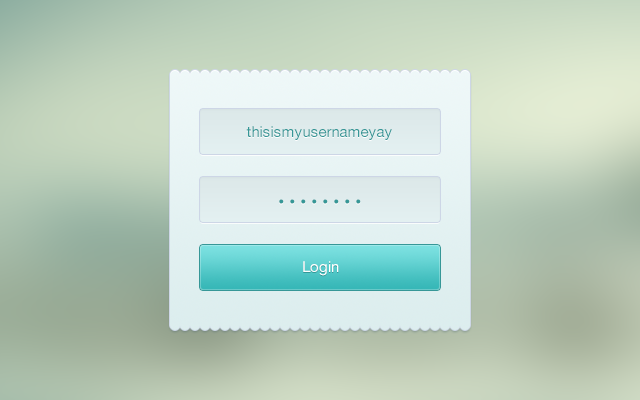
<style>
.page{position:relative;width:640px;height:400px}
.page>*{position:absolute;margin:0}
.t1{font:15px/71px "HelveticaNeue";color:#369797}
.t2{font:18px/71px "Helvetica-Bold";color:#369797}
.t3{font:15px "HelveticaNeue";color:#ffffff}
</style>
<div class="page">
<p class="t1" style="left:246px;top:126px;width:146px;height:78px;text-align:center">thisismyusernameyay<br><span class="t2">• • • • • • • •</span></p>
<p class="t3" style="left:303px;top:261px;width:36px;height:15px">Login</p>
</div>
